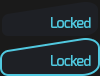
<style>
.page{position:relative;width:100px;height:76px;background:#1e2025}
.page>*{position:absolute;margin:0}
.t1{font:14px "Exo-Medium";letter-spacing:-0.04em;color:#51c9e0}
</style>
<div class="page">
<p class="t1" style="left:51px;top:17px;width:40px;height:11px">Locked</p>
<p class="t1" style="left:51px;top:55px;width:40px;height:11px">Locked</p>
</div>
